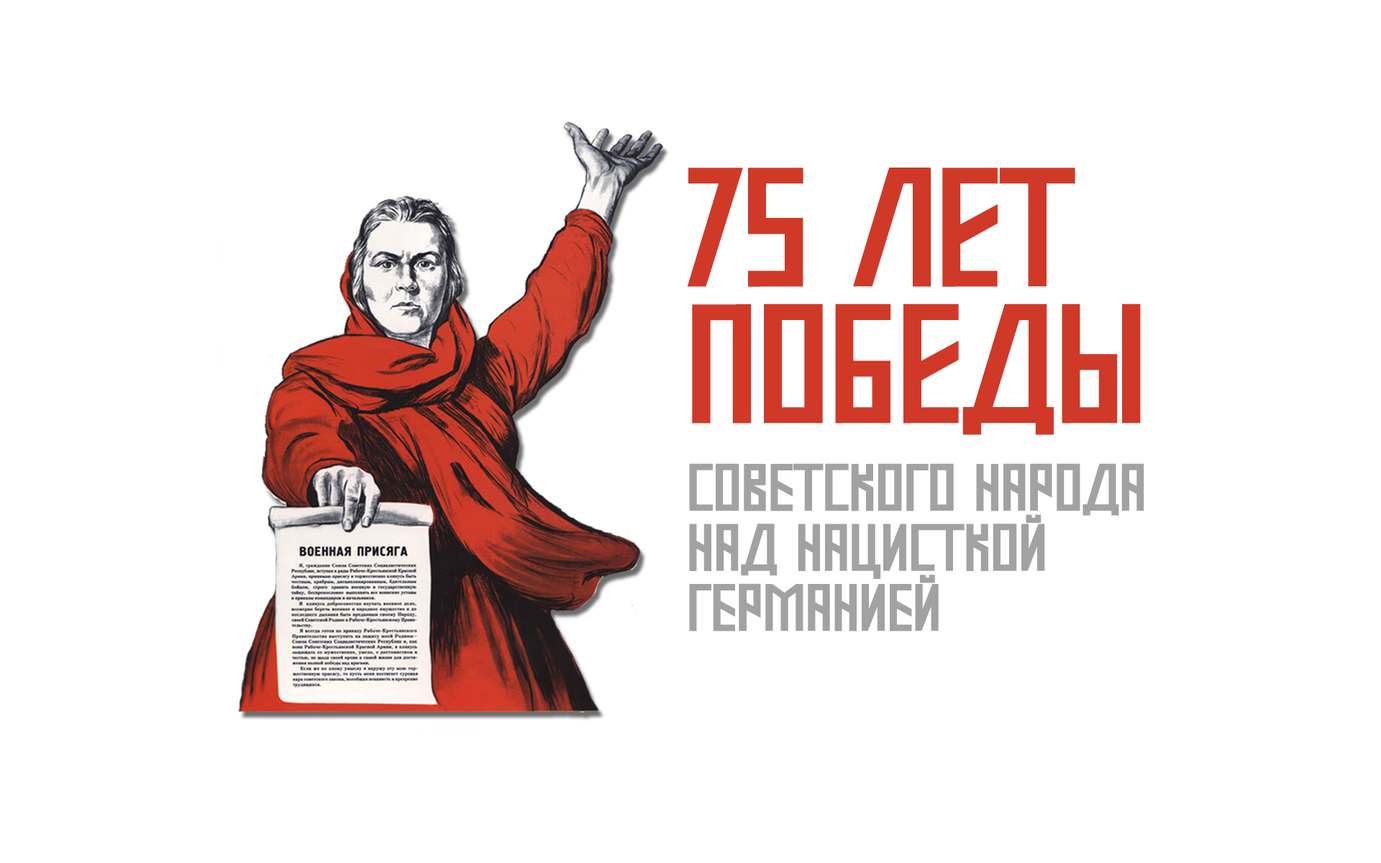
<style>
.page{position:relative;width:1381px;height:863px;background:#ffffff}
.page>*{position:absolute;margin:0}
.t1{font:152.3px/136.5px "Mastodon-Bold";color:#d03927}
.t2{font:60.1px/60.1px "Mastodon-Bold";color:#a2a2a2}
</style>
<div class="page">
<p class="t1" style="left:687px;top:168px;width:454px;height:267px">75 лет<br>победы</p>
<p class="t2" style="left:689px;top:463px;width:456px;height:169px">СОВЕТСКОГО НАРОДА<br>НАД НАЦИСТКОЙ <br>ГЕРМАНИЕЙ</p>
</div>
